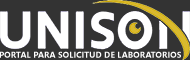
<style>
.page{position:relative;width:190px;height:60px;background:#333333}
.page>*{position:absolute;margin:0}
.t1{font:8.5px "SegoeUI-Bold";color:#ffffff}
</style>
<div class="page">
<p class="t1" style="left:0px;top:51px;width:181px;height:7px">PORTAL PARA SOLICITUD DE LABORATORIOS</p>
</div>
